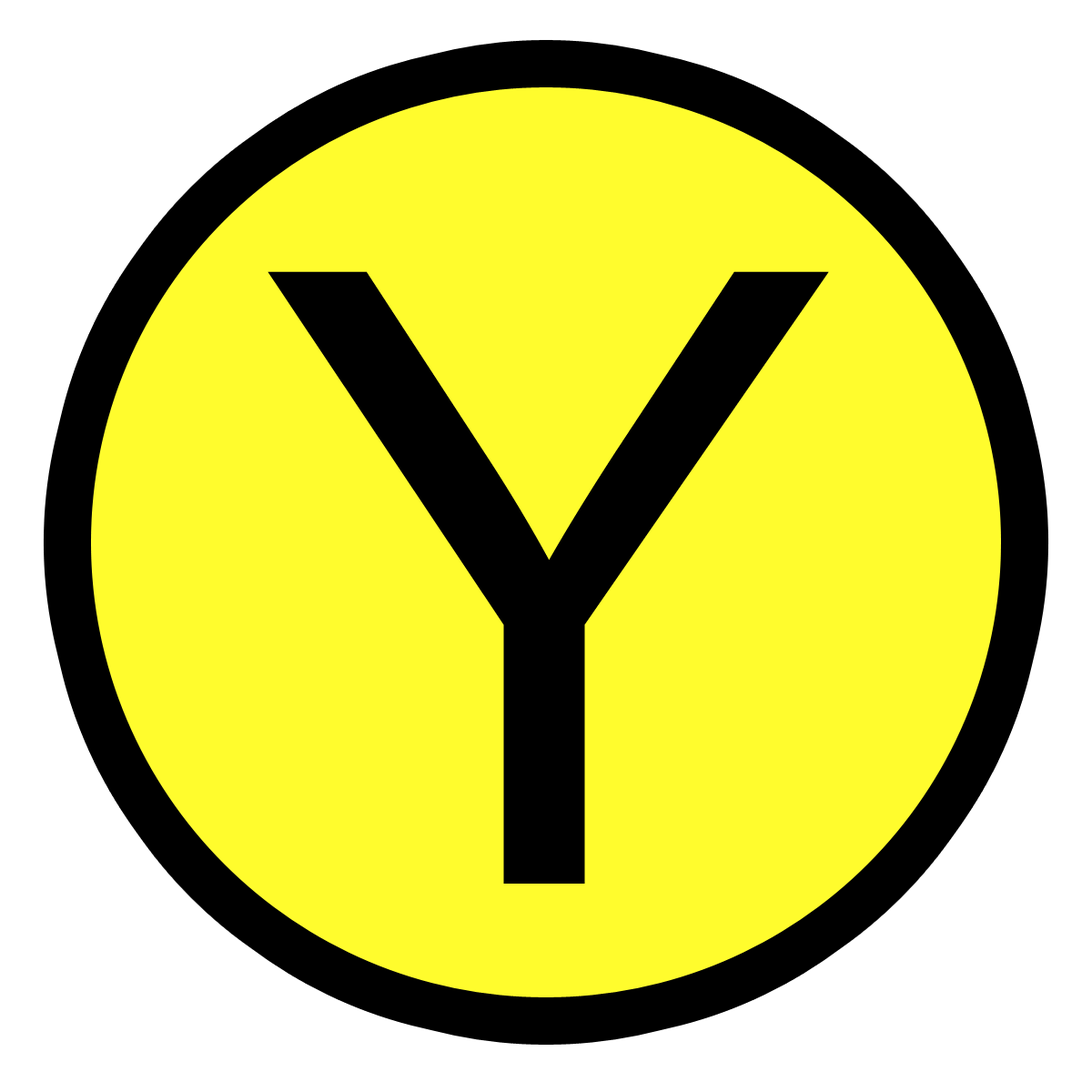
<style>
.page{position:relative;width:1092px;height:1092px;background:#fffc2d}
.page>*{position:absolute;margin:0}
.t1{font:853.1px "ArialMT";color:#000000}
</style>
<div class="page">
<p class="t1" style="left:268px;top:271px;width:561px;height:613px">Y</p>
</div>
